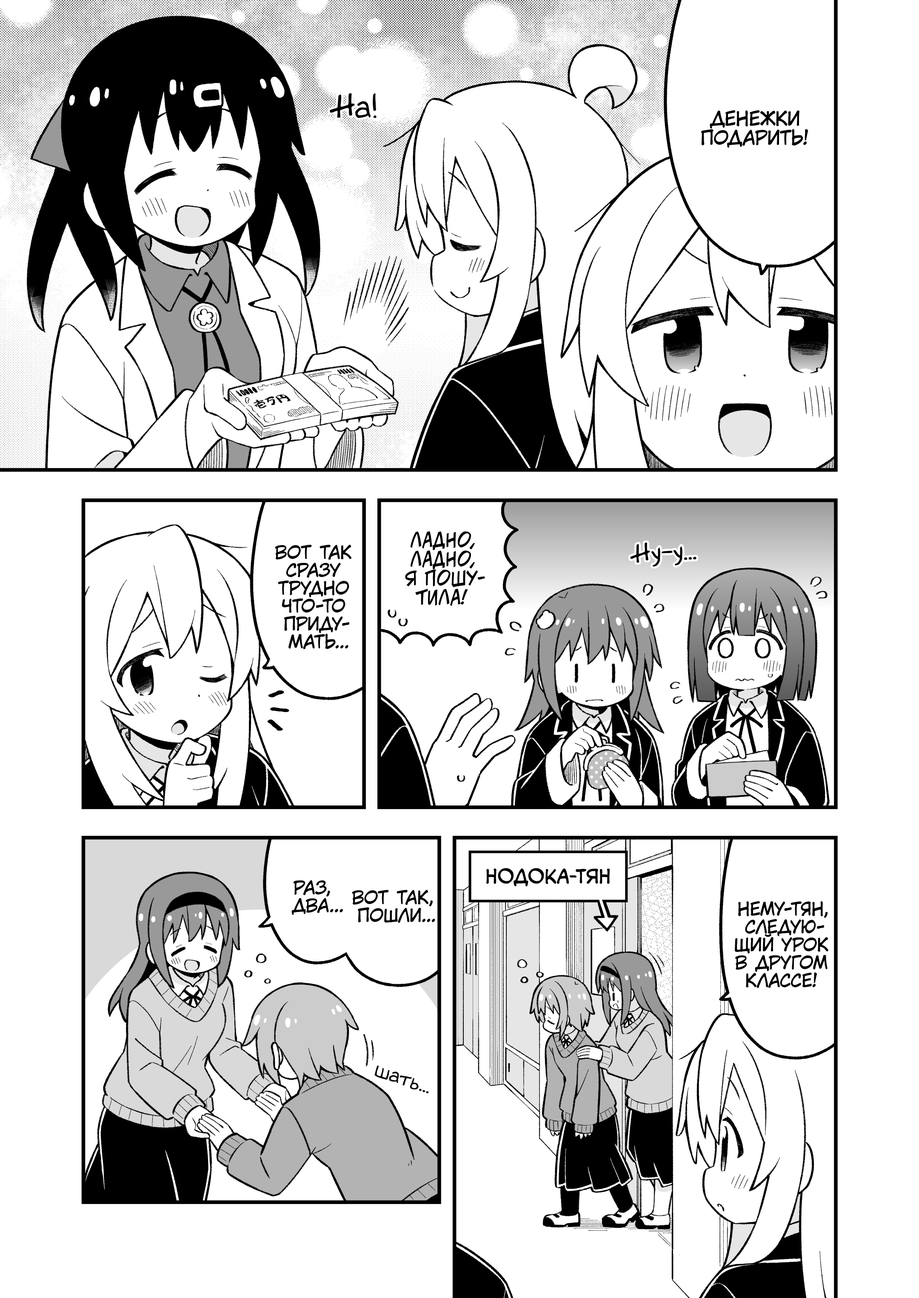
<style>
.page{position:relative;width:919px;height:1298px;background:#ffffff}
.page>*{position:absolute;margin:0}
.t1{font:31.9px "v_Augie";color:#000000}
.t2{font:19.1px "KuraiVoice2";color:#000000;text-transform:uppercase}
.t3{font:19.1px "v_CCJeffCampbell";color:#000000;text-transform:uppercase}
.t4{font:17.9px "KuraiVoice2";color:#000000;text-transform:uppercase}
.t5{font:25.5px "v_Augie";color:#000000}
.t6{font:19.1px "v_CCMonologous";color:#000000;text-transform:uppercase}
.t7{font:20.4px "v_Augie";color:#000000}
</style>
<div class="page">
<p class="t1" style="left:330px;top:93px;width:47px;height:25px">На!</p>
<p class="t2" style="left:701px;top:110px;width:107px;height:38px;text-align:center">Денежки<br>подарить!</p>
<p class="t3" style="left:405px;top:531px;width:80px;height:75px;text-align:center">Ладно,<br>ладно,<br>я пошу-<br>тила!</p>
<p class="t4" style="left:275px;top:545px;width:76px;height:104px;text-align:center">Вот так<br>сразу<br>трудно<br>что-то<br>приду-<br>мать...</p>
<p class="t5" style="left:630px;top:542px;width:66px;height:25px;rotate:-3deg">Ну-у...</p>
<p class="t6" style="left:486px;top:868px;width:124px;height:18px">Нодока-тян</p>
<p class="t4" style="left:291px;top:880px;width:52px;height:35px;text-align:center">Раз,<br>два...</p>
<p class="t4" style="left:352px;top:890px;width:83px;height:33px;text-align:center">Вот так,<br>пошли...</p>
<p class="t4" style="left:735px;top:901px;width:93px;height:87px;text-align:center">Нему-тян,<br>следую-<br>щий урок<br>в другом<br>классе!</p>
<p class="t7" style="left:374px;top:1065px;width:55px;height:28px;rotate:19deg">шать...</p>
</div>
